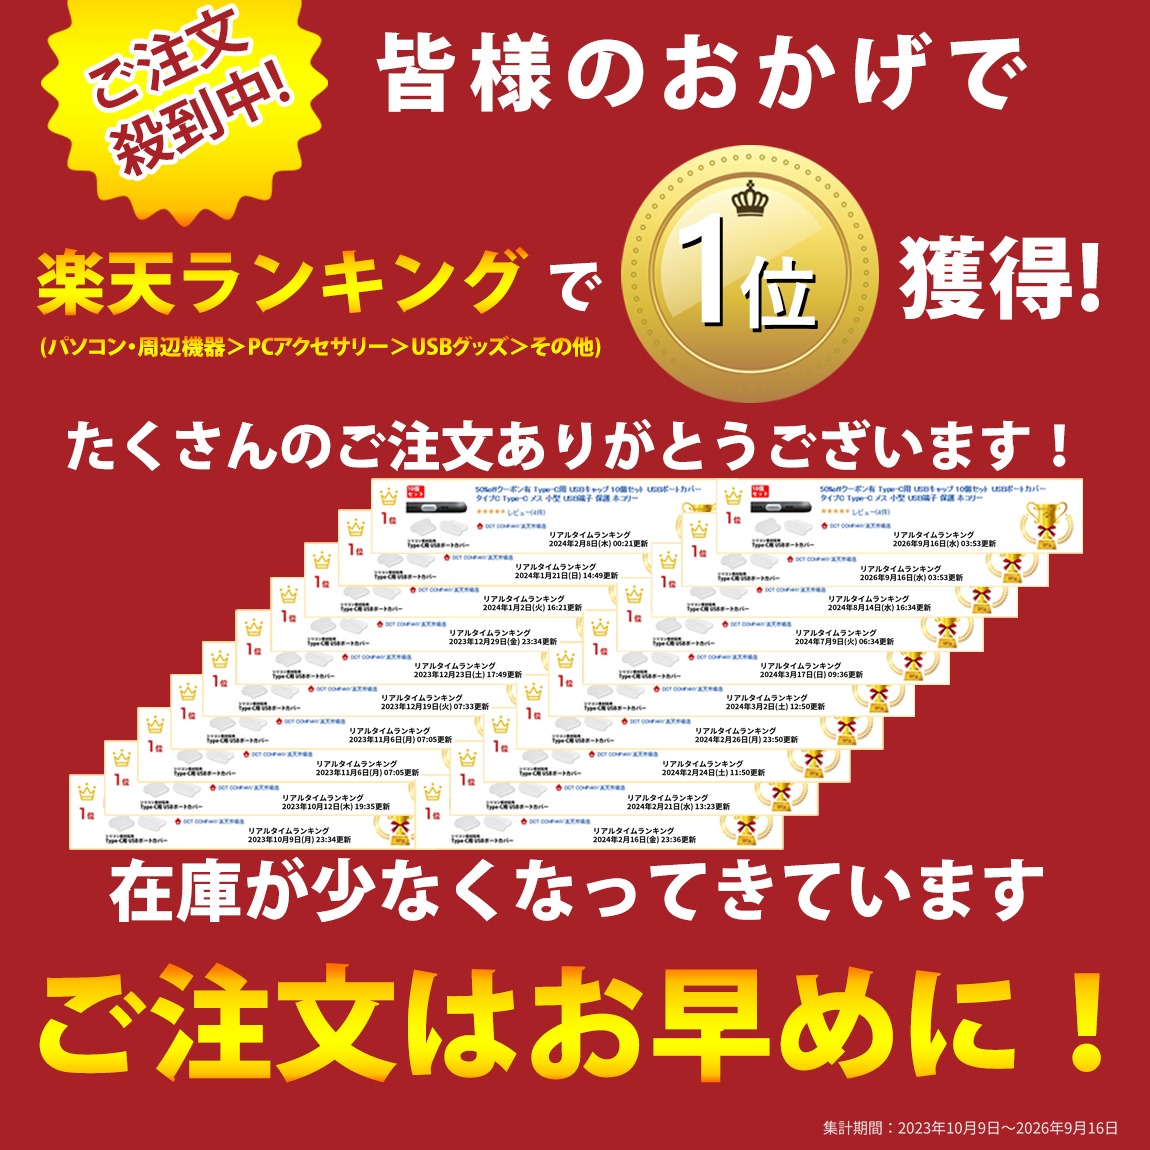
<style>
.page{position:relative;width:1150px;height:1150px;background:#a82127}
.page>*{position:absolute;margin:0}
.t1{font:56.9px "KozGoPr6N-Bold";color:#a82127}
.t2{font:83.3px "KozGoPr6N-Heavy";letter-spacing:0.14em;color:#ffffff}
.t3{font:150.6px "YuGothicUI-Semibold";color:#ffffff;font-weight:bold}
.t4{font:78.7px "YuGothicUI-Semibold";color:#ffffff;font-weight:bold}
.t5{font:70.5px "KozGoPr6N-Heavy"}
.t6{font:87.8px "KozGoPr6N-Heavy";letter-spacing:0.02em;color:#ffffff}
.t7{font:56.8px "KozGoPr6N-Heavy";color:#ffffff}
.t8{font:22px "KozGoPr6N-Heavy"}
.t9{font:53.8px "KozGoPr6N-Heavy";color:#ffffff}
.t10{font:7.4px/9.2px "KozGoPr6N-Bold";color:#000000}
.t11{font:67px "KozGoPr6N-Heavy";color:#ffffff}
.t12{font:125.2px "KozGoPr6N-Heavy"}
.t13{font:15px "KozGoPr6N-Regular";color:#e6e6e6}
</style>
<div class="page">
<p class="t1" style="left:88px;top:8px;width:202px;height:169px;rotate:-25deg">ご注文<br>殺到中!</p>
<p class="t2" style="left:376px;top:31px;width:651px;height:81px">皆様のおかげで</p>
<p class="t3" style="left:679px;top:213px;width:136px;height:116px">1<span class="t4">位</span></p>
<p class="t5" style="left:36px;top:246px;width:493px;height:70px">楽天ランキング</p>
<p class="t6" style="left:899px;top:235px;width:200px;height:85px">獲得!</p>
<p class="t7" style="left:550px;top:262px;width:52px;height:50px">で</p>
<p class="t8" style="left:41px;top:335px;width:560px;height:23px">(パソコン・周辺機器＞PCアクセサリー＞USBグッズ＞その他)</p>
<p class="t9" style="left:67px;top:419px;width:999px;height:53px">たくさんのご注文ありがとうございます！</p>
<p class="t10" style="left:549px;top:529px;width:101px;height:21px">リアルタイムランキング<br>2024年2月8日(木) 00:21更新</p>
<p class="t10" style="left:893px;top:529px;width:105px;height:21px">リアルタイムランキング<br>2026年9月16日(水) 03:53更新</p>
<p class="t10" style="left:515px;top:561px;width:105px;height:21px">リアルタイムランキング<br>2024年1月21日(日) 14:49更新</p>
<p class="t10" style="left:860px;top:563px;width:105px;height:21px">リアルタイムランキング<br>2026年9月16日(水) 03:53更新</p>
<p class="t10" style="left:483px;top:593px;width:101px;height:21px">リアルタイムランキング<br>2024年1月2日(火) 16:21更新</p>
<p class="t10" style="left:828px;top:593px;width:105px;height:21px">リアルタイムランキング<br>2024年8月14日(水) 16:34更新</p>
<p class="t10" style="left:449px;top:627px;width:110px;height:21px">リアルタイムランキング<br>2023年12月29日(金) 23:34更新</p>
<p class="t10" style="left:795px;top:627px;width:101px;height:21px">リアルタイムランキング<br>2024年7月9日(火) 06:34更新</p>
<p class="t10" style="left:414px;top:660px;width:110px;height:21px">リアルタイムランキング<br>2023年12月23日(土) 17:49更新</p>
<p class="t10" style="left:760px;top:660px;width:105px;height:21px">リアルタイムランキング<br>2024年3月17日(日) 09:36更新</p>
<p class="t10" style="left:381px;top:692px;width:110px;height:21px">リアルタイムランキング<br>2023年12月19日(火) 07:33更新</p>
<p class="t10" style="left:726px;top:692px;width:101px;height:21px">リアルタイムランキング<br>2024年3月2日(土) 12:50更新</p>
<p class="t10" style="left:349px;top:725px;width:105px;height:21px">リアルタイムランキング<br>2023年11月6日(月) 07:05更新</p>
<p class="t10" style="left:695px;top:725px;width:105px;height:21px">リアルタイムランキング<br>2024年2月26日(月) 23:50更新</p>
<p class="t10" style="left:316px;top:758px;width:105px;height:21px">リアルタイムランキング<br>2023年11月6日(月) 07:05更新</p>
<p class="t10" style="left:662px;top:758px;width:105px;height:21px">リアルタイムランキング<br>2024年2月24日(土) 11:50更新</p>
<p class="t10" style="left:282px;top:792px;width:110px;height:21px">リアルタイムランキング<br>2023年10月12日(木) 19:35更新</p>
<p class="t10" style="left:627px;top:792px;width:105px;height:21px">リアルタイムランキング<br>2024年2月21日(水) 13:23更新</p>
<p class="t10" style="left:248px;top:825px;width:105px;height:21px">リアルタイムランキング<br>2023年10月9日(月) 23:34更新</p>
<p class="t10" style="left:593px;top:825px;width:105px;height:21px">リアルタイムランキング<br>2024年2月16日(金) 23:36更新</p>
<p class="t11" style="left:109px;top:856px;width:934px;height:67px">在庫が少なくなってきています</p>
<p class="t12" style="left:39px;top:962px;width:1062px;height:121px">ご注文はお早めに！</p>
<p class="t13" style="left:821px;top:1118px;width:298px;height:19px">集計期間：2023年10月9日～2026年9月16日</p>
</div>
